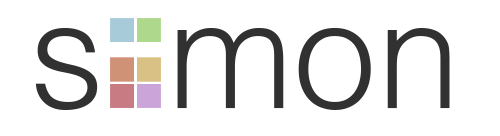
<style>
.page{position:relative;width:500px;height:136px;background:#ffffff}
.page>*{position:absolute;margin:0}
.t1{font:150px "Helvetica-Light";color:#313131}
</style>
<div class="page">
<p class="t1" style="left:35px;top:28px;width:415px;height:82px">s mon</p>
</div>
